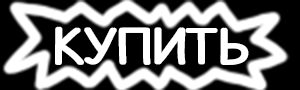
<style>
.page{position:relative;width:300px;height:90px;background:#000000}
.page>*{position:absolute;margin:0}
.t1{font:50px "HQYSaversText";letter-spacing:0.02em;color:#ffffff}
</style>
<div class="page">
<p class="t1" style="left:55px;top:26px;width:192px;height:39px">КУПИТЬ</p>
<p class="t1" style="left:57px;top:26px;width:192px;height:39px">КУПИТЬ</p>
</div>
